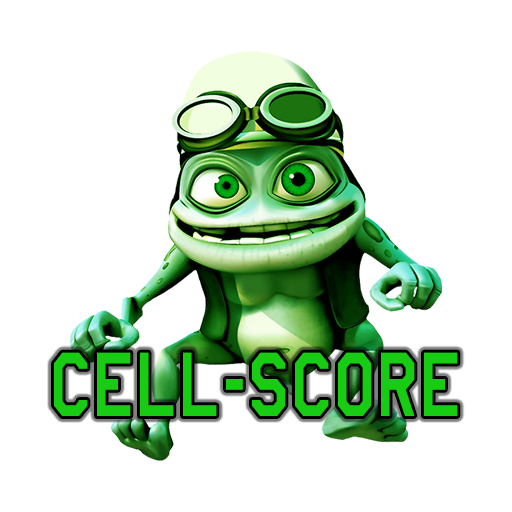
<style>
.page{position:relative;width:512px;height:512px;background:#ffffff}
.page>*{position:absolute;margin:0}
.t1{font:105.1px "AmarilloUSAF";letter-spacing:0.02em;color:#18cc13;scale:0.79 1}
</style>
<div class="page">
<p class="t1" style="left:54px;top:352px;width:404px;height:64px">Cell-Score</p>
</div>
